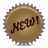
<style>
.page{position:relative;width:48px;height:48px;background:#ffffff}
.page>*{position:absolute;margin:0}
.t1{font:11.2px "Bello-Script";color:#251104}
</style>
<div class="page">
<p class="t1" style="left:10px;top:15px;width:29px;height:19px;rotate:-17deg">NEW!</p>
<p class="t1" style="left:10px;top:15px;width:29px;height:19px;rotate:-17deg">NEW!</p>
</div>
